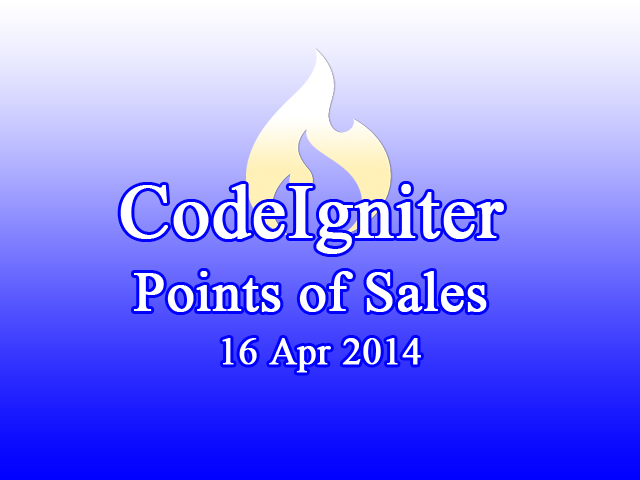
<style>
.page{position:relative;width:640px;height:480px}
.page>*{position:absolute;margin:0}
.t1{font:76px "TimesNewRomanPSMT";color:#ffffff;font-weight:bold}
.t2{font:56px "TimesNewRomanPSMT";color:#ffffff;font-weight:bold}
.t3{font:38px "TimesNewRomanPSMT";color:#ffffff;font-weight:bold}
</style>
<div class="page">
<p class="t1" style="left:120px;top:184px;width:384px;height:70px">CodeIgniter</p>
<p class="t2" style="left:134px;top:271px;width:353px;height:41px">Points of Sales</p>
<p class="t3" style="left:222px;top:338px;width:199px;height:35px">16 Apr 2014</p>
</div>
